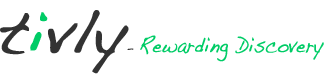
<style>
.page{position:relative;width:324px;height:74px;background:#ffffff}
.page>*{position:absolute;margin:0}
.t1{font:22px "Handwriting-Dakota";letter-spacing:0.01em;color:#00cc66;font-weight:bold;scale:0.8 1}
.t2{font:60px "Handwriting-Dakota";letter-spacing:0.01em;color:#333333;font-weight:bold}
.t3{font:60px "Handwriting-Dakota";letter-spacing:0.01em;color:#00cc66;font-weight:bold}
.t4{font:11.8px "Handwriting-Dakota";letter-spacing:0.01em;color:#333333;font-weight:bold}
</style>
<div class="page">
<p class="t1" style="left:0px;top:10px;width:324px;height:64px"><span class="t2">t</span><span class="t3">i</span><span class="t2">vly</span><span class="t4">- </span>Rewarding Discovery</p>
</div>
